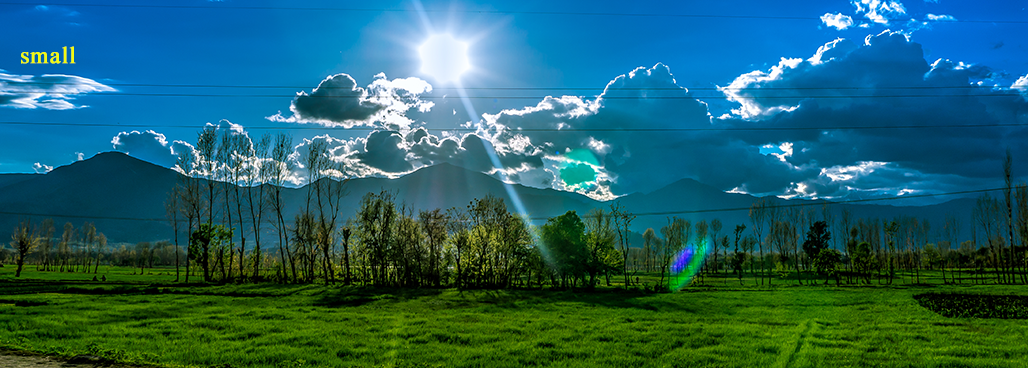
<style>
.page{position:relative;width:1028px;height:368px}
.page>*{position:absolute;margin:0}
.t1{font:23.5px "TimesNewRomanPSMT";letter-spacing:0.025em;color:#f2fa0f;font-weight:bold}
</style>
<div class="page">
<p class="t1" style="left:21px;top:46px;width:55px;height:18px">small</p>
</div>
